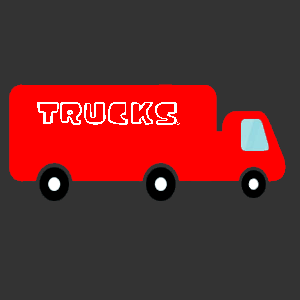
<style>
.page{position:relative;width:300px;height:300px;background:#333333}
.page>*{position:absolute;margin:0}
.t1{font:48px "iceagefont";color:#ffffff}
.t2{font:6px "iceagefont";color:#ffffff}
</style>
<div class="page">
<p class="t1" style="left:37px;top:102px;width:143px;height:23px">TruckS<span class="t2">s</span></p>
</div>
